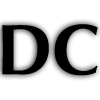
<style>
.page{position:relative;width:100px;height:100px;background:#ffffff}
.page>*{position:absolute;margin:0}
.t1{font:71.7px "Optima-Bold";color:#000000}
</style>
<div class="page">
<p class="t1" style="left:2px;top:24px;width:96px;height:52px">DC</p>
</div>
